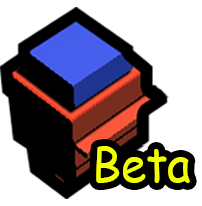
<style>
.page{position:relative;width:202px;height:206px;background:#ffffff}
.page>*{position:absolute;margin:0}
.t1{font:48px "ComicSansMS";color:#f2ff00;scale:0.95 1}
</style>
<div class="page">
<p class="t1" style="left:96px;top:146px;width:94px;height:37px">Beta</p>
</div>
